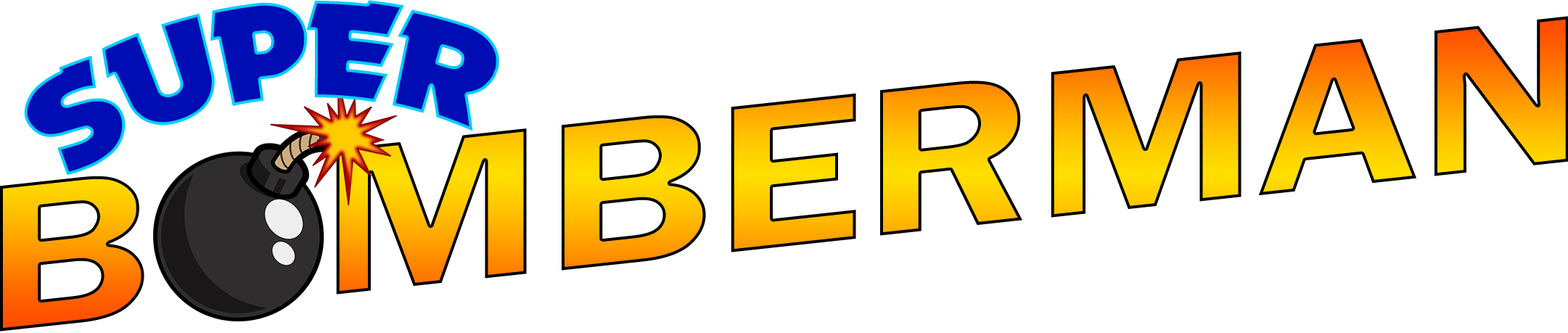
<style>
.page{position:relative;width:1568px;height:333px;background:#ffffff}
.page>*{position:absolute;margin:0}
.t1{font:133.8px "November";color:#000db2;scale:0.9 1}
.t2{font:217.6px "FranklinGothic-Demi";scale:1.21 1}
</style>
<div class="page">
<p class="t1" style="left:24px;top:0px;width:475px;height:175px;rotate:-7deg">SUPER</p>
<p class="t2" style="left:0px;top:16px;width:1569px;height:316px;rotate:-6deg">BOMBERMAN</p>
</div>
